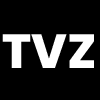
<style>
.page{position:relative;width:100px;height:100px;background:#000000}
.page>*{position:absolute;margin:0}
.t1{font:48px "Poppins-ExtraBold";color:#ffffff}
</style>
<div class="page">
<p class="t1" style="left:2px;top:34px;width:92px;height:34px">TVZ</p>
</div>
